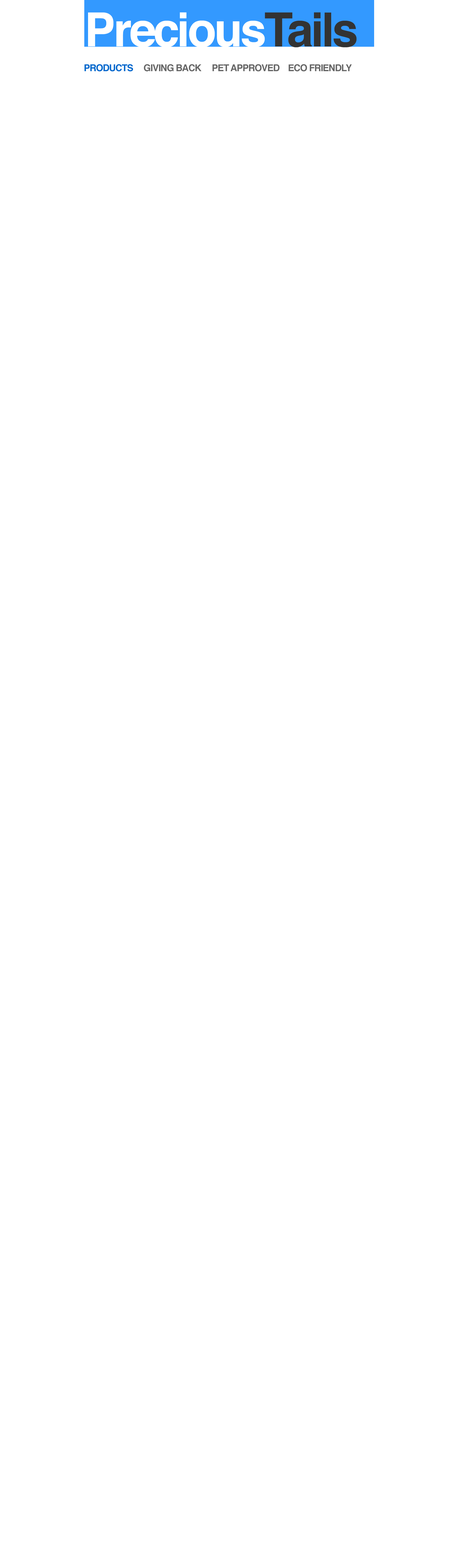
<style>
.page{position:relative;width:470px;height:1568px;background:#ffffff}
.page>*{position:absolute;margin:0}
.t1{font:47px "Helvetica-Bold";letter-spacing:-0.05em;color:#ffffff}
.t2{font:47px "Helvetica-Bold";letter-spacing:-0.05em;color:#333333}
.t3{font:9.4px "Helvetica-Bold";letter-spacing:-0.05em;color:#666666}
.t4{font:9.4px "Helvetica-Bold";letter-spacing:-0.05em;color:#0066cc}
</style>
<div class="page">
<p class="t1" style="left:88px;top:12px;width:269px;height:35px">Precious<span class="t2">Tails</span></p>
<p class="t3" style="left:84px;top:64px;width:268px;height:8px"><span class="t4">PRODUCTS     </span>GIVING BACK     PET APPROVED    ECO FRIENDLY</p>
</div>
